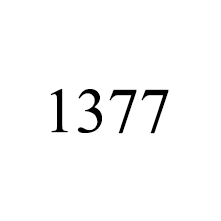
<style>
.page{position:relative;width:221px;height:221px;background:#ffffff}
.page>*{position:absolute;margin:0}
.t1{font:63.9px "TimesNewRomanPSMT";color:#000000}
</style>
<div class="page">
<p class="t1" style="left:50px;top:89px;width:119px;height:45px">1377</p>
</div>
